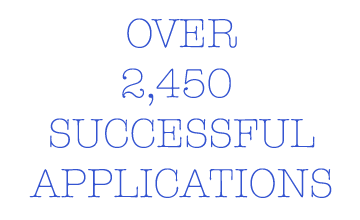
<style>
.page{position:relative;width:360px;height:220px;background:#ffffff}
.page>*{position:absolute;margin:0}
.t1{font:41.7px "AmericanTypewriter-Light";color:#3454d1}
</style>
<div class="page">
<p class="t1" style="left:29px;top:18px;width:303px;height:180px;text-align:center">OVER<br>2,450 <br>SUCCESSFUL<br>APPLICATIONS</p>
</div>
